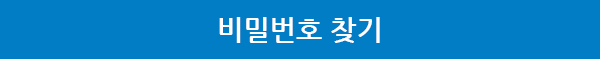
<style>
.page{position:relative;width:600px;height:59px;background:#007dc5}
.page>*{position:absolute;margin:0}
.t1{font:28px "NanumGothicBold";color:#ffffff}
</style>
<div class="page">
<p class="t1" style="left:219px;top:17px;width:161px;height:26px">비밀번호 찾기</p>
</div>
